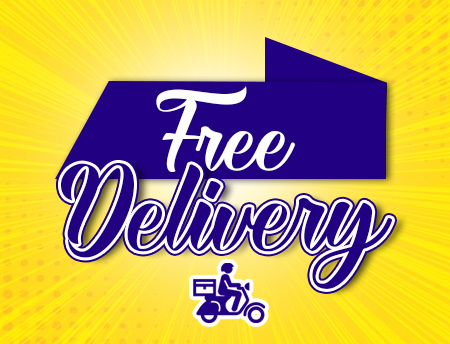
<style>
.page{position:relative;width:450px;height:344px;background:#210082}
.page>*{position:absolute;margin:0}
.t1{font:103.9px "Royante-Regular";color:#ffffff}
.t2{font:125.8px "Royante-Regular";color:#210082}
</style>
<div class="page">
<p class="t1" style="left:156px;top:86px;width:139px;height:86px">Free</p>
<p class="t2" style="left:61px;top:163px;width:332px;height:126px">Delivery</p>
</div>
